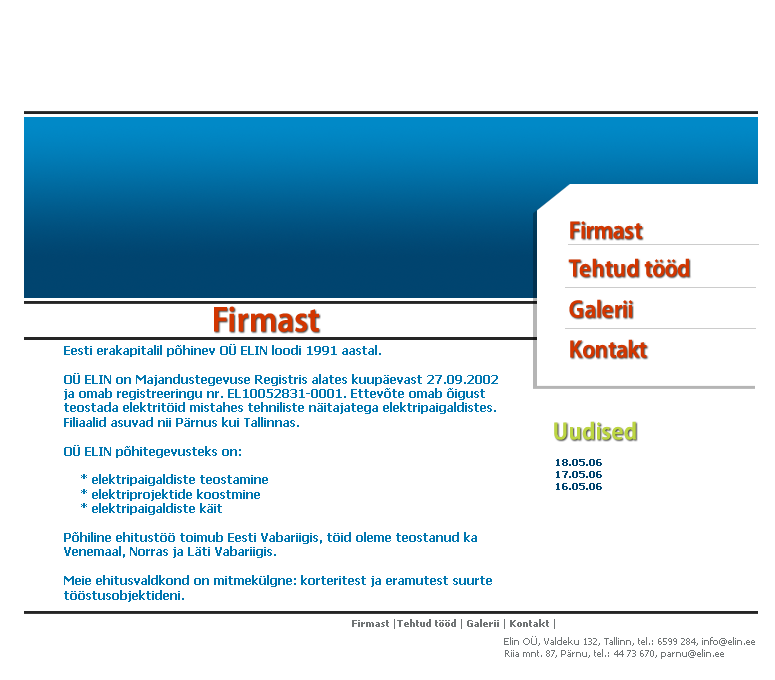
<style>
.page{position:relative;width:775px;height:680px;background:#ffffff}
.page>*{position:absolute;margin:0}
.t1{font:25px "MyriadPro-SemiboldSemiCn";color:#d23600}
.t2{font:36px "MyriadPro-SemiboldSemiCn";color:#d23600}
.t3{font:12px "Tahoma-Bold";color:#0177b0}
.t4{font:25px "MyriadPro-SemiboldSemiCn";color:#bdd643}
.t5{font:10px "Tahoma-Bold";color:#014570}
.t6{font:10px "Tahoma-Bold";color:#707475}
.t7{font:10px "Tahoma";color:#707475}
</style>
<div class="page">
<p class="t1" style="left:570px;top:221px;width:72px;height:18px">Firmast</p>
<p class="t1" style="left:568px;top:258px;width:122px;height:19px">Tehtud tööd</p>
<p class="t1" style="left:569px;top:299px;width:64px;height:19px">Galerii</p>
<p class="t2" style="left:214px;top:306px;width:105px;height:26px">Firmast</p>
<p class="t1" style="left:570px;top:339px;width:77px;height:19px">Kontakt</p>
<p class="t3" style="left:64px;top:344px;width:434px;height:258px">Eesti erakapitalil põhinev OÜ ELIN loodi 1991 aastal.<br><br>OÜ ELIN on Majandustegevuse Registris alates kuupäevast 27.09.2002 ja omab registreeringu nr. EL10052831-0001. Ettevõte omab õigust teostada elektritöid mistahes tehniliste näitajatega elektripaigaldistes. Filiaalid asuvad nii Pärnus kui Tallinnas.<br><br>OÜ ELIN põhitegevusteks on:<br><br>    * elektripaigaldiste teostamine<br>    * elektriprojektide koostmine<br>    * elektripaigaldiste käit <br><br>Põhiline ehitustöö toimub Eesti Vabariigis, töid oleme teostanud ka Venemaal, Norras ja Läti Vabariigis.<br><br>Meie ehitusvaldkond on mitmekülgne: korteritest ja eramutest suurte tööstusobjektideni.</p>
<p class="t4" style="left:554px;top:421px;width:82px;height:19px">Uudised</p>
<p class="t5" style="left:556px;top:459px;width:46px;height:31px">18.05.06 <br>17.05.06 <br>16.05.06</p>
<p class="t6" style="left:352px;top:619px;width:203px;height:10px"><span class="t7">  </span>Firmast<span class="t7"> |</span>Tehtud tööd <span class="t7">| </span>Galerii <span class="t7">| </span>Kontakt <span class="t7">|</span></p>
<p class="t7" style="left:504px;top:636px;width:251px;height:23px;text-align:center">Elin OÜ, Valdeku 132, Tallinn, tel.: 6599 284, info@elin.ee<br> Riia mnt. 87, Pärnu, tel.: 44 73 670, parnu@elin.ee</p>
</div>
